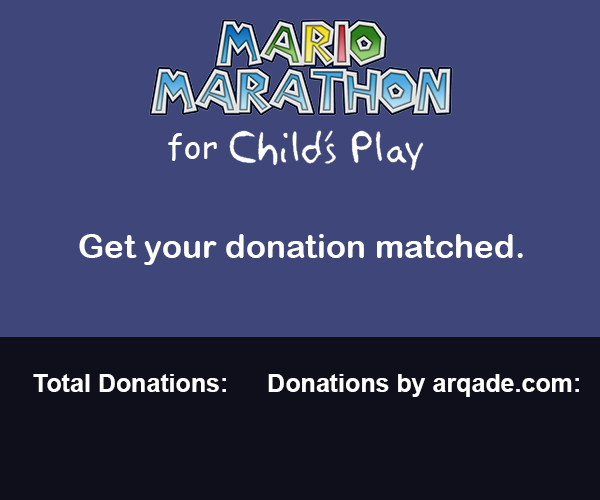
<style>
.page{position:relative;width:600px;height:500px;background:#3f467a}
.page>*{position:absolute;margin:0}
.t1{font:33.3px "ComicSansMS";color:#ffffff}
.t2{font:33.3px "ArialRoundedMTBold";color:#ffffff}
.t3{font:25px "Arial-BoldMT";color:#ffffff}
</style>
<div class="page">
<p class="t1" style="left:168px;top:133px;width:49px;height:28px">for</p>
<p class="t2" style="left:79px;top:234px;width:444px;height:31px">Get your donation matched.</p>
<p class="t3" style="left:33px;top:374px;width:193px;height:18px">Total Donations:</p>
<p class="t3" style="left:268px;top:374px;width:311px;height:23px">Donations by arqade.com:</p>
</div>
